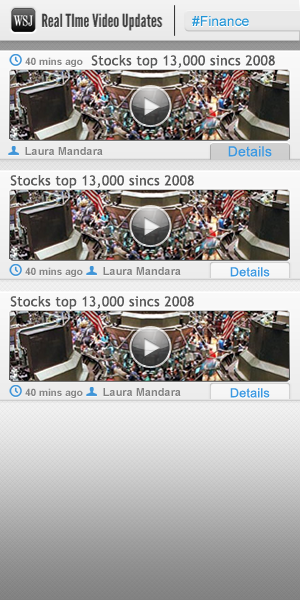
<style>
.page{position:relative;width:300px;height:600px}
.page>*{position:absolute;margin:0}
.t1{font:18px "LeagueGothic";color:#3d3d3d}
.t2{font:14px "ArialMT";color:#2194d6}
.t3{font:10px "Arial-BoldMT";color:#858585}
.t4{font:13.9px "TrebuchetMS";letter-spacing:0.02em;color:#595959}
.t5{font:11px "Arial-BoldMT";color:#828282}
.t6{font:13.9px "ArialMT";letter-spacing:0.02em;color:#3d99e1}
.t7{font:12.5px "ArialMT";letter-spacing:0.02em;color:#3d99e1}
</style>
<div class="page">
<p class="t1" style="left:41px;top:12px;width:122px;height:19px">Real TIme Video Updates</p>
<p class="t2" style="left:192px;top:16px;width:57px;height:10px">#Finance</p>
<p class="t3" style="left:25px;top:57px;width:58px;height:10px">40 mins ago</p>
<p class="t4" style="left:91px;top:55px;width:184px;height:14px">Stocks top 13,000 sincs 2008</p>
<p class="t5" style="left:25px;top:147px;width:78px;height:8px">Laura Mandara</p>
<p class="t6" style="left:228px;top:146px;width:44px;height:11px">Details</p>
<p class="t4" style="left:10px;top:175px;width:184px;height:14px">Stocks top 13,000 sincs 2008</p>
<p class="t3" style="left:25px;top:267px;width:58px;height:10px">40 mins ago</p>
<p class="t5" style="left:103px;top:267px;width:78px;height:8px">Laura Mandara</p>
<p class="t7" style="left:230px;top:267px;width:40px;height:10px">Details</p>
<p class="t4" style="left:10px;top:296px;width:184px;height:14px">Stocks top 13,000 sincs 2008</p>
<p class="t3" style="left:25px;top:388px;width:58px;height:10px">40 mins ago</p>
<p class="t5" style="left:103px;top:388px;width:78px;height:8px">Laura Mandara</p>
<p class="t7" style="left:230px;top:388px;width:40px;height:10px">Details</p>
</div>
